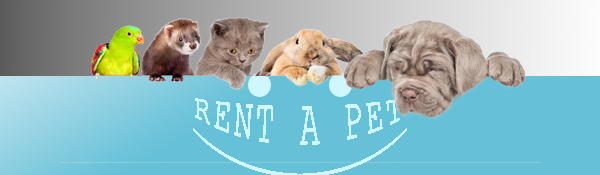
<style>
.page{position:relative;width:600px;height:175px;background:#66c1d8}
.page>*{position:absolute;margin:0}
.t1{font:30.3px "CourierNewPSMT";letter-spacing:0.1em;color:#d0f6ff;text-transform:uppercase;text-decoration:underline}
</style>
<div class="page">
<p class="t1" style="left:193px;top:98px;width:214px;height:79px;text-align:center">Rent a Pet</p>
</div>
